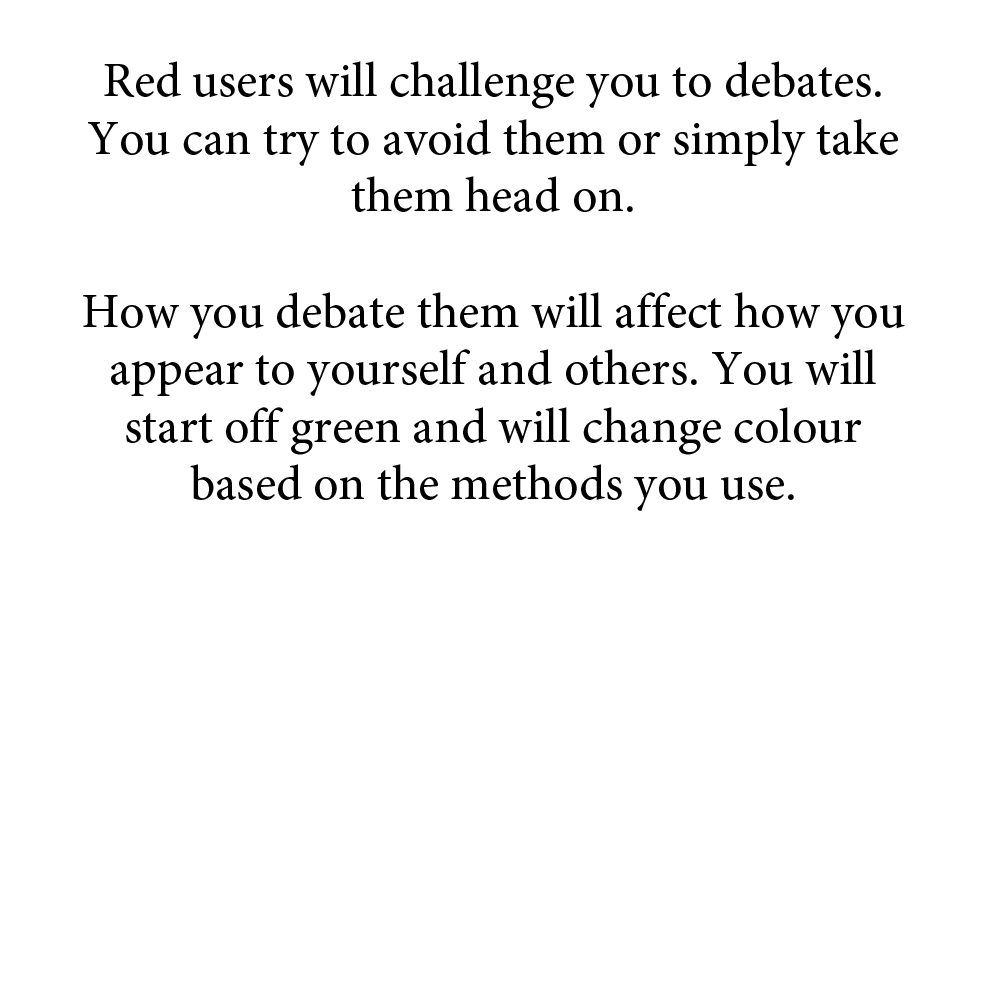
<style>
.page{position:relative;width:1000px;height:1000px;background:#ffffff}
.page>*{position:absolute;margin:0}
.t1{font:48px "AdobeHebrew-Regular";color:#000000}
</style>
<div class="page">
<p class="t1" style="left:83px;top:61px;width:822px;height:450px;text-align:center">Red users will challenge you to debates. <br>You can try to avoid them or simply take them head on.<br><br>How you debate them will affect how you appear to yourself and others. You will start off green and will change colour based on the methods you use.</p>
</div>
